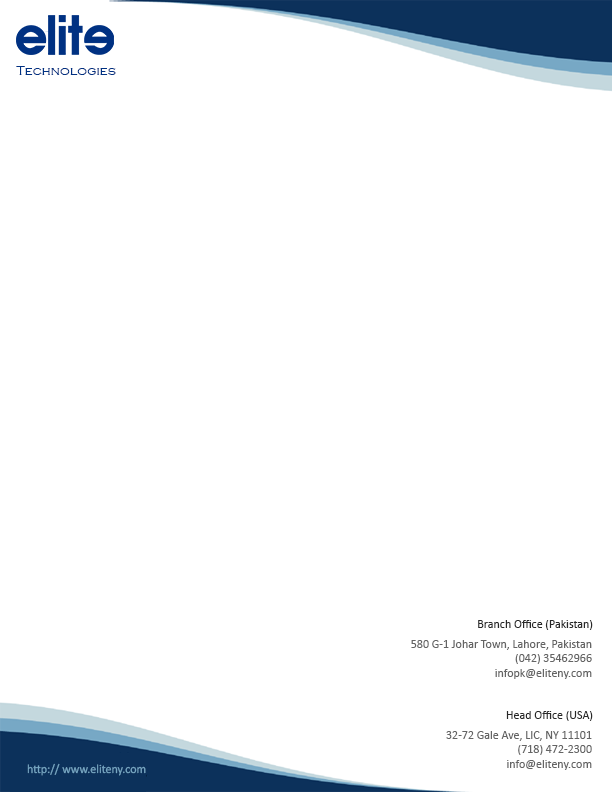
<style>
.page{position:relative;width:612px;height:792px;background:#ffffff}
.page>*{position:absolute;margin:0}
.t1{font:13px "CopperplateGothic-Light";color:#003182}
.t2{font:12px "Calibri";color:#282828}
.t3{font:12px "Calibri";color:#646464}
.t4{font:12.4px "Calibri";color:#77a8c5;scale:0.96 1}
</style>
<div class="page">
<p class="t1" style="left:16px;top:66px;width:100px;height:9px">Technologies</p>
<p class="t2" style="left:478px;top:620px;width:115px;height:10px">Branch Office (Pakistan)</p>
<p class="t3" style="left:411px;top:640px;width:181px;height:39px;text-align:right">580 G-1 Johar Town, Lahore, Pakistan<br>(042) 35462966<br>infopk@eliteny.com</p>
<p class="t2" style="left:506px;top:711px;width:87px;height:10px">Head Office (USA)</p>
<p class="t3" style="left:446px;top:731px;width:146px;height:39px;text-align:right">32-72 Gale Ave, LIC, NY 11101<br>(718) 472-2300<br>info@eliteny.com</p>
<p class="t4" style="left:27px;top:763px;width:119px;height:13px">http:// www.eliteny.com</p>
</div>
